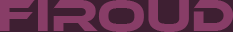
<style>
.page{position:relative;width:233px;height:32px;background:#883d67}
.page>*{position:absolute;margin:0}
.t1{font:46.1px "EthnocentricRg-Regular";color:#883d67}
</style>
<div class="page">
<p class="t1" style="left:0px;top:0px;width:233px;height:32px">FIROUD</p>
</div>
